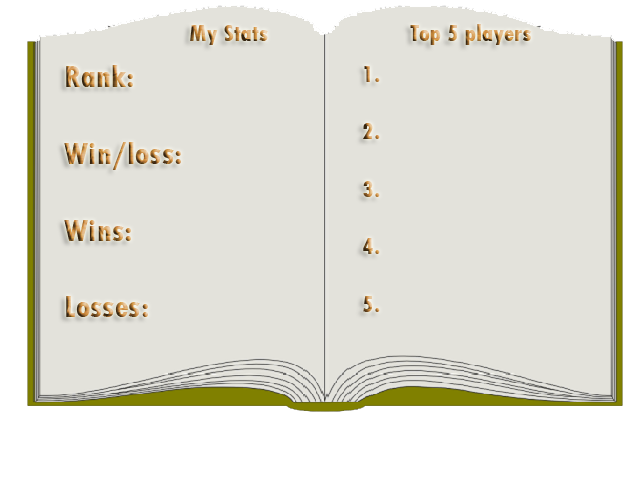
<style>
.page{position:relative;width:640px;height:481px;background:#e3e2db}
.page>*{position:absolute;margin:0}
.t1{font:24px "TwCenMT-CondensedExtraBold"}
.t2{font:32px "TwCenMT-CondensedExtraBold"}
</style>
<div class="page">
<p class="t1" style="left:190px;top:24px;width:342px;height:21px">My Stats          Top 5 players</p>
<p class="t2" style="left:64px;top:65px;width:117px;height:252px">Rank:        <br><br>Win/loss:      <br><br>Wins:<br><br>Losses:</p>
<p class="t1" style="left:363px;top:66px;width:17px;height:246px">1.<br><br>2.<br><br>3.<br><br>4.<br><br>5.</p>
</div>
